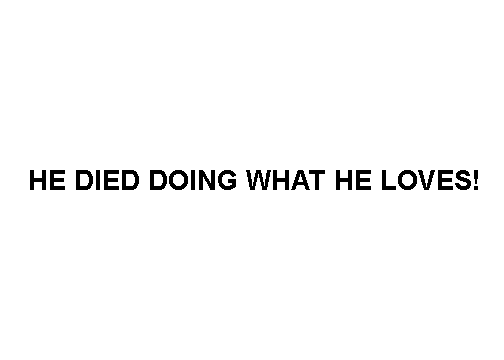
<style>
.page{position:relative;width:504px;height:360px;background:#ffffff}
.page>*{position:absolute;margin:0}
.t1{font:26.8px "Arial-BoldMT";color:#000000}
</style>
<div class="page">
<p class="t1" style="left:30px;top:170px;width:448px;height:20px">HE DIED DOING WHAT HE LOVES!</p>
</div>
